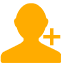
<style>
.page{position:relative;width:63px;height:64px;background:#ffac00}
.page>*{position:absolute;margin:0}
.t1{font:35.6px "SegoeUI-Bold";color:#ffac00}
</style>
<div class="page">
<p class="t1" style="left:43px;top:28px;width:18px;height:18px">+</p>
</div>
